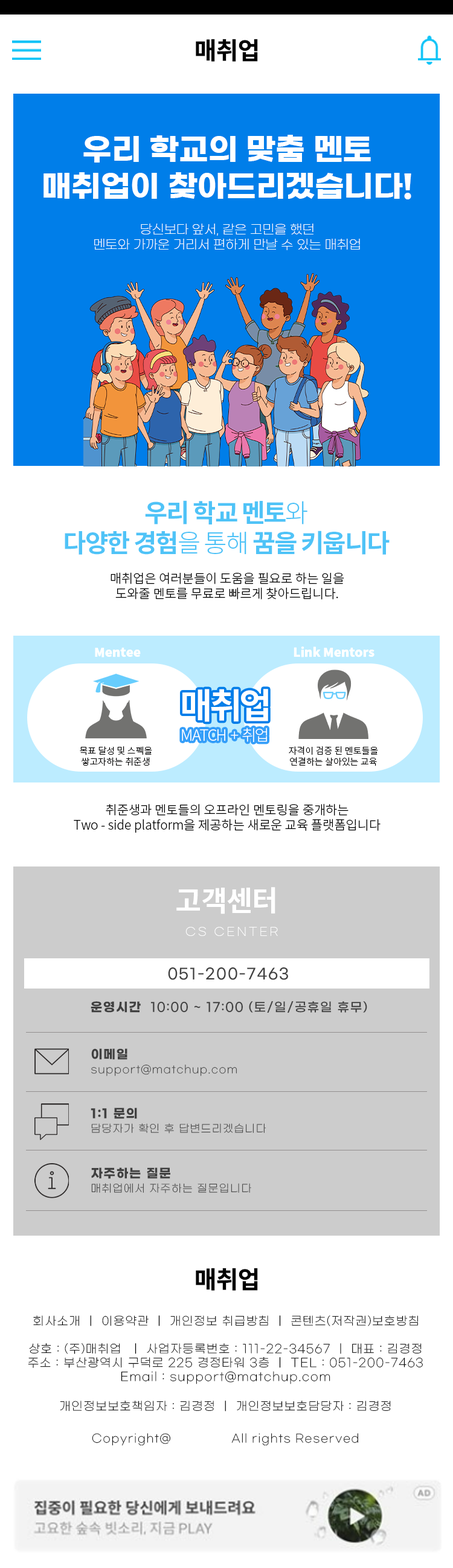
<style>
.page{position:relative;width:453px;height:1568px;background:#ffffff}
.page>*{position:absolute;margin:0}
.t1{font:24.2px "NotoSansKR-Bold";letter-spacing:-0.02em;color:#000000}
.t2{font:30.5px "GmarketSansTTFBold";color:#ffffff}
.t3{font:12.6px "GmarketSansTTFLight";color:#ffffff}
.t4{font:25.3px "NotoSansKR-Bold";letter-spacing:-0.05em;color:#4fc3f7}
.t5{font:25.3px "NotoSansKR-Light";letter-spacing:-0.05em;color:#4fc3f7}
.t6{font:12.6px "NotoSansKR-Light";color:#000000}
.t7{font:12.3px "NotoSansKR-Black";color:#ffffff}
.t8{font:35.3px "NotoSansKR-Bold";letter-spacing:-0.075em;color:#ffffff;text-transform:uppercase}
.t9{font:15.5px "NotoSansKR-Light";letter-spacing:-0.075em;color:#ffffff;text-transform:uppercase}
.t10{font:9.1px "NotoSansKR-Light";color:#000000}
.t11{font:28.5px "NotoSansKR-Bold";letter-spacing:-0.02em;color:#ffffff}
.t12{font:11.3px "GmarketSansTTFLight";letter-spacing:0.2em;color:#ffffff}
.t13{font:14.8px "GmarketSansTTFMedium";letter-spacing:0.075em;color:#404040}
.t14{font:12.3px "GmarketSansTTFMedium";letter-spacing:0.075em;color:#404040}
.t15{font:12.3px "GmarketSansTTFBold";letter-spacing:0.075em;color:#404040}
.t16{font:10.6px "GmarketSansTTFLight";letter-spacing:0.075em;color:#404040}
.t17{font:11.6px "GmarketSansTTFLight";letter-spacing:0.075em;color:#000000}
.t18{font:11.2px "GmarketSansTTFLight";letter-spacing:0.075em;color:#000000}
</style>
<div class="page">
<p class="t1" style="left:196px;top:39px;width:62px;height:23px">매취업</p>
<p class="t2" style="left:44px;top:135px;width:367px;height:64px;text-align:center">우리 학교의 맞춤 멘토<br>매취업이 찾아드리겠습니다!</p>
<p class="t3" style="left:94px;top:224px;width:266px;height:26px;text-align:center">당신보다 앞서, 같은 고민을 했던<br>멘토와 가까운 거리서 편하게 만날 수 있는 매취업</p>
<p class="t4" style="left:65px;top:500px;width:325px;height:55px;text-align:center">우리 학교 멘토<span class="t5">와<br></span>다양한 경험<span class="t5">을 통해</span> 꿈을 키웁니다</p>
<p class="t6" style="left:111px;top:572px;width:233px;height:27px;text-align:center">매취업은 여러분들이 도움을 필요로 하는 일을<br>도와줄 멘토를 무료로 빠르게 찾아드립니다.</p>
<p class="t7" style="left:95px;top:647px;width:46px;height:10px">Mentee</p>
<p class="t7" style="left:294px;top:647px;width:81px;height:10px">Link Mentors</p>
<p class="t8" style="left:182px;top:689px;width:86px;height:33px">매취업</p>
<p class="t9" style="left:182px;top:728px;width:85px;height:14px">match  +  취업</p>
<p class="t10" style="left:80px;top:746px;width:72px;height:20px;text-align:center">목표 달성 및 스펙을<br>쌓고자하는 취준생</p>
<p class="t10" style="left:289px;top:746px;width:89px;height:20px;text-align:center">자격이 검증 된 멘토들을<br>연결하는 살아있는 교육</p>
<p class="t6" style="left:74px;top:804px;width:307px;height:29px;text-align:center">취준생과 멘토들의 오프라인 멘토링을 중개하는<br>Two - side platform을 제공하는 새로운 교육 플랫폼입니다</p>
<p class="t11" style="left:176px;top:887px;width:100px;height:27px">고객센터</p>
<p class="t12" style="left:186px;top:927px;width:92px;height:9px">CS CENTER</p>
<p class="t13" style="left:168px;top:967px;width:120px;height:13px">051-200-7463</p>
<p class="t14" style="left:91px;top:1001px;width:276px;height:12px"><span class="t15">운영시간  </span>10:00 ~ 17:00 (토/일/공휴일 휴무)</p>
<p class="t16" style="left:91px;top:1048px;width:146px;height:28px"><span class="t15">이메일<br></span>support@matchup.com</p>
<p class="t16" style="left:91px;top:1108px;width:175px;height:26px"><span class="t15">1:1 문의<br></span>담당자가 확인 후 답변드리겠습니다</p>
<p class="t16" style="left:91px;top:1167px;width:160px;height:26px"><span class="t15">자주하는 질문<br></span>매취업에서 자주하는 질문입니다</p>
<p class="t1" style="left:196px;top:1268px;width:62px;height:23px">매취업</p>
<p class="t17" style="left:33px;top:1315px;width:385px;height:11px">회사소개 ｜ 이용약관 ｜ 개인정보 취급방침 ｜ 콘텐츠(저작권)보호방침</p>
<p class="t17" style="left:28px;top:1343px;width:395px;height:41px;text-align:center">상호 : (주)매취업  ｜ 사업자등록번호 : 111-22-34567 ｜ 대표 : 김경정<br>주소 : 부산광역시 구덕로 225 경정타워 3층 ｜ TEL : 051-200-7463<br>Email : support@matchup.com</p>
<p class="t17" style="left:60px;top:1401px;width:331px;height:11px">개인정보보호책임자 : 김경정 ｜ 개인정보보호담당자 : 김경정</p>
<p class="t18" style="left:92px;top:1433px;width:266px;height:12px">Copyright@               All rights Reserved</p>
</div>
